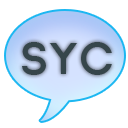
<style>
.page{position:relative;width:128px;height:128px;background:#ffffff}
.page>*{position:absolute;margin:0}
.t1{font:36px "Criticized";letter-spacing:0.025em;color:#483d3d}
</style>
<div class="page">
<p class="t1" style="left:22px;top:42px;width:90px;height:33px">SYC</p>
</div>
